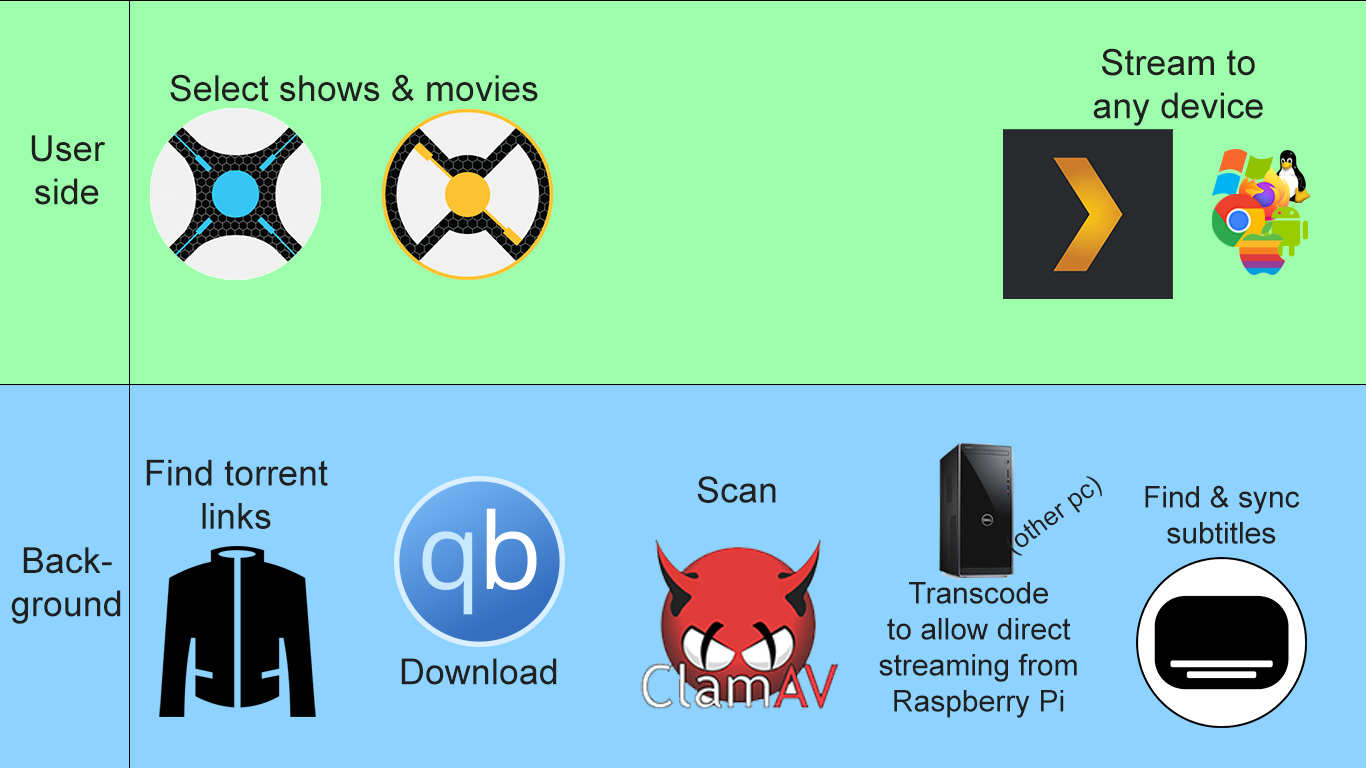
<style>
.page{position:relative;width:1366px;height:768px;background:#9dffab}
.page>*{position:absolute;margin:0}
.t1{font:36px "ArialMT";color:#202020}
.t2{font:26.3px "ArialMT";color:#202020}
.t3{font:30px "ArialMT";color:#202020}
</style>
<div class="page">
<p class="t1" style="left:1093px;top:48px;width:170px;height:78px;text-align:center">Stream to<br>any device</p>
<p class="t1" style="left:170px;top:74px;width:368px;height:28px">Select shows &amp; movies</p>
<p class="t1" style="left:31px;top:135px;width:75px;height:70px;text-align:center">User<br>side</p>
<p class="t1" style="left:146px;top:459px;width:182px;height:70px;text-align:center">Find torrent<br>links</p>
<p class="t1" style="left:697px;top:476px;width:79px;height:27px">Scan</p>
<p class="t2" style="left:1006px;top:476px;width:96px;height:80px;rotate:-37deg">(other pc)</p>
<p class="t3" style="left:1145px;top:485px;width:155px;height:59px;text-align:center">Find &amp; sync<br>subtitles</p>
<p class="t1" style="left:11px;top:547px;width:110px;height:77px;text-align:center">Back-<br>ground</p>
<p class="t3" style="left:879px;top:582px;width:198px;height:136px;text-align:center">Transcode<br>to allow direct<br>streaming from<br>Raspberry Pi</p>
<p class="t1" style="left:401px;top:658px;width:156px;height:27px">Download</p>
</div>
